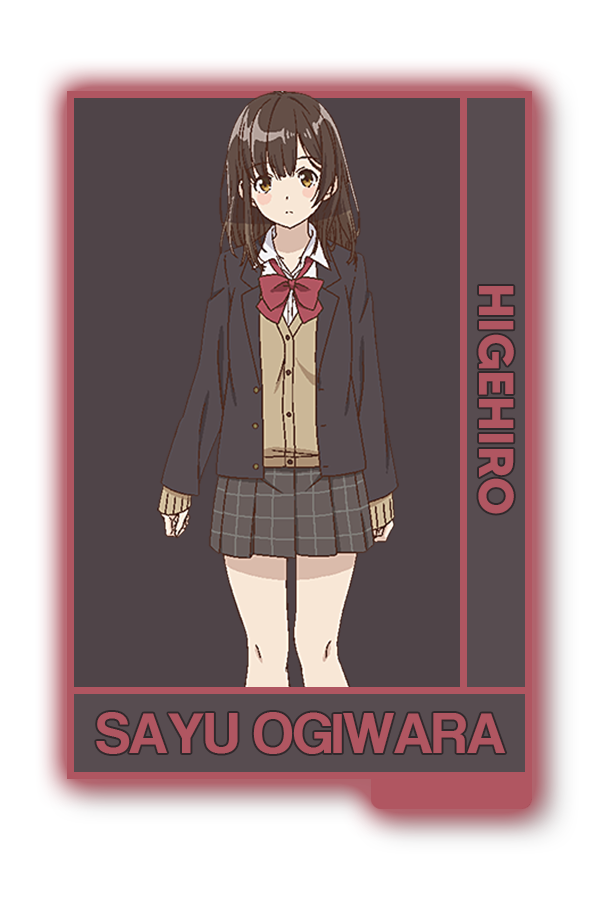
<style>
.page{position:relative;width:600px;height:900px;background:#4f4448}
.page>*{position:absolute;margin:0}
.t1{font:48.8px "MADETOMMY-Bold";color:#b05661}
.t2{font:59.5px "CoolveticaRg-Regular";color:#b05661}
</style>
<div class="page">
<p class="t1" style="left:478px;top:286px;width:36px;height:228px;rotate:90deg">HIGEHIRO</p>
<p class="t2" style="left:96px;top:712px;width:410px;height:42px">SAYU OGIWARA</p>
</div>
